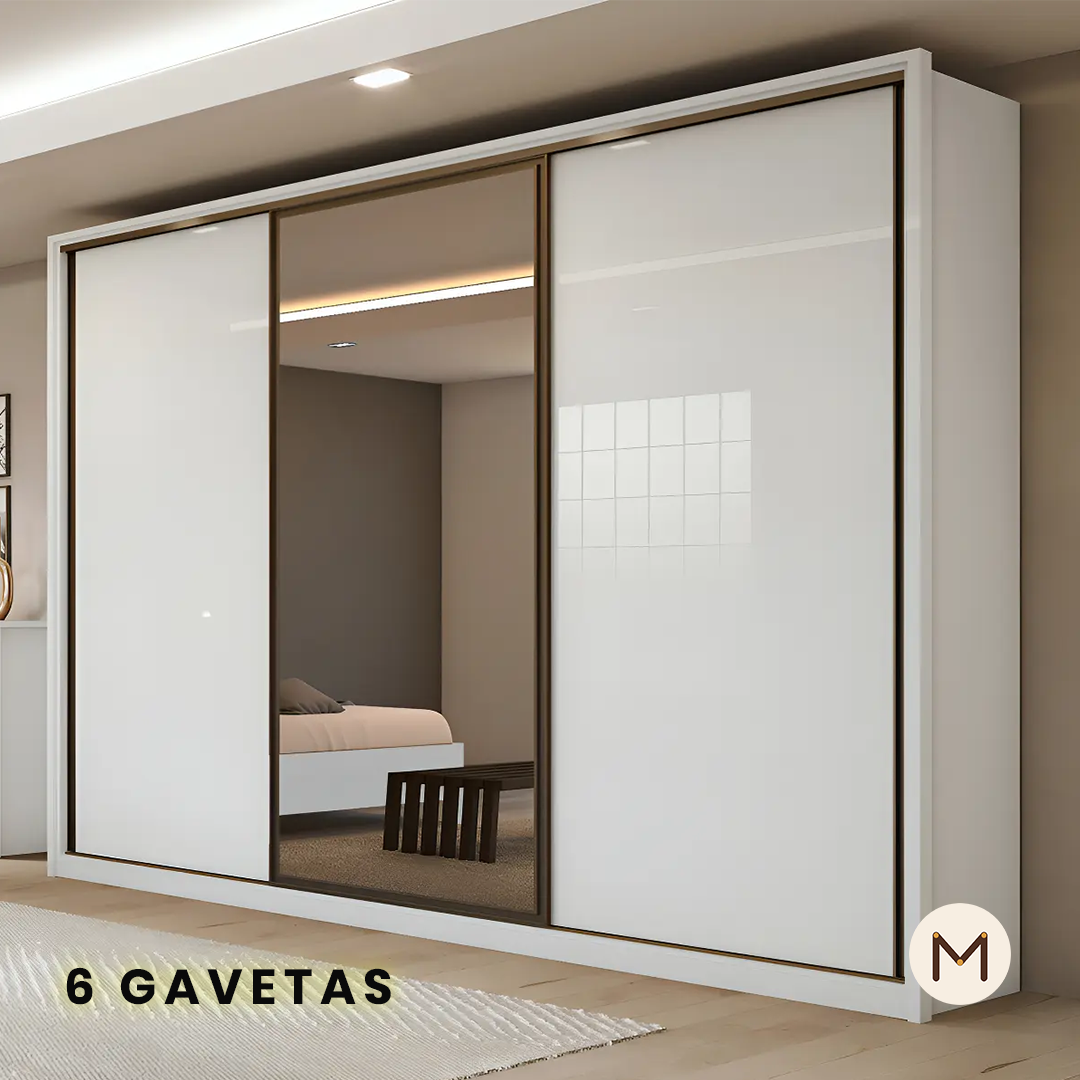
<style>
.page{position:relative;width:1080px;height:1080px}
.page>*{position:absolute;margin:0}
.t1{font:49.1px "Poppins-Bold";letter-spacing:0.15em;color:#0a0a0a;text-transform:uppercase}
</style>
<div class="page">
<p class="t1" style="left:66px;top:967px;width:325px;height:38px">6 GAVETAS</p>
</div>
